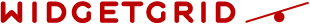
<style>
.page{position:relative;width:310px;height:24px;background:#ffffff}
.page>*{position:absolute;margin:0}
.t1{font:57px "Estilo";letter-spacing:-0.02em;color:#bb0000;font-weight:bold}
</style>
<div class="page">
<p class="t1" style="left:0px;top:1px;width:236px;height:22px">widgetgrid</p>
</div>
